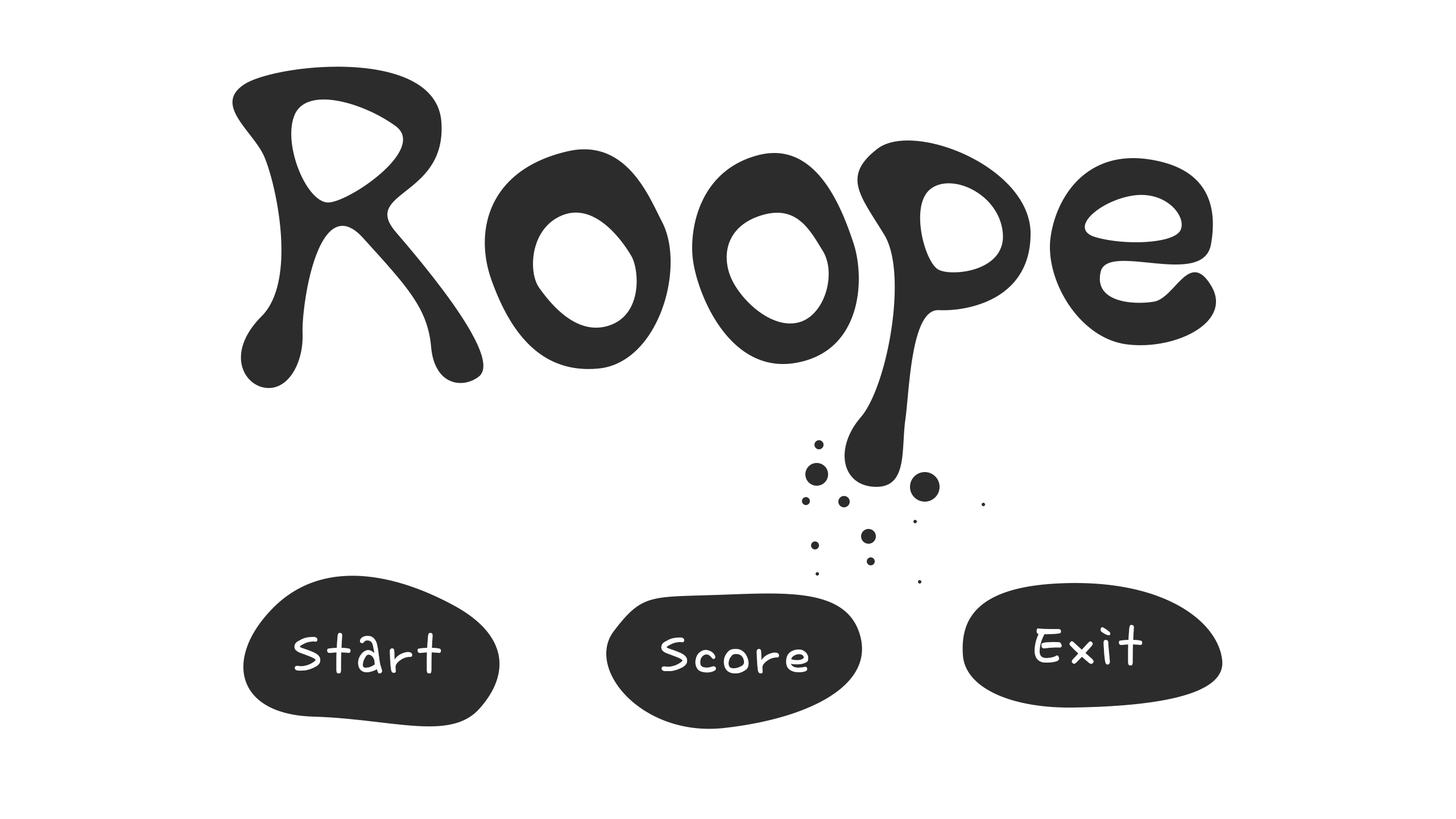
<style>
.page{position:relative;width:1456px;height:819px;background:#ffffff}
.page>*{position:absolute;margin:0}
.t1{font:79px "SDMiSaeng";letter-spacing:0.04em;color:#ffffff}
</style>
<div class="page">
<p class="t1" style="left:1035px;top:624px;width:108px;height:41px">Exit</p>
<p class="t1" style="left:294px;top:632px;width:147px;height:41px">Start</p>
<p class="t1" style="left:661px;top:637px;width:147px;height:36px">Score</p>
</div>
